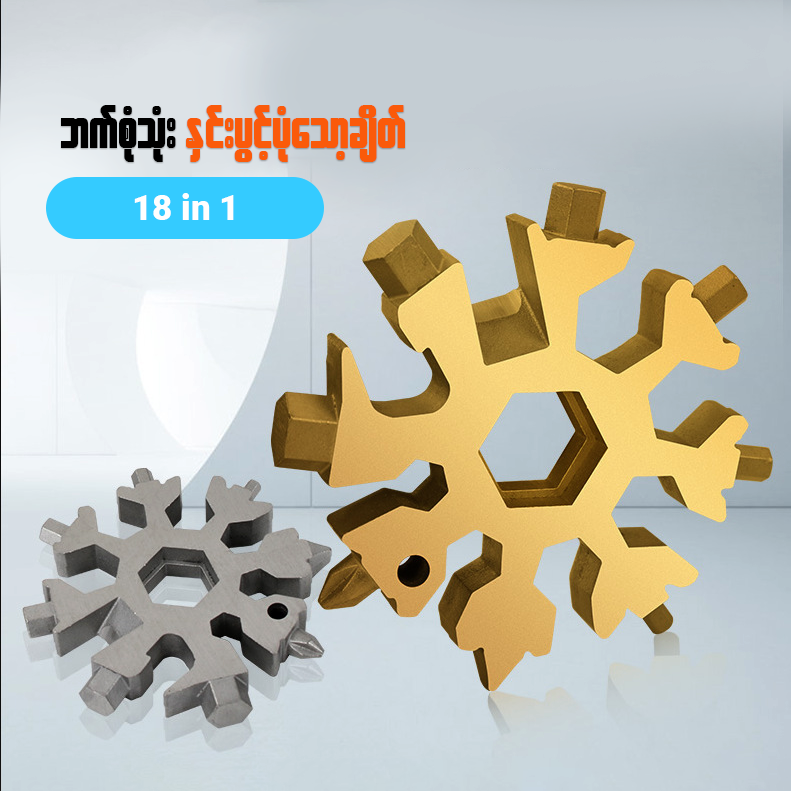
<style>
.page{position:relative;width:791px;height:791px}
.page>*{position:absolute;margin:0}
.t1{font:57.6px "W30ArtHouse";color:#fa5a0a}
.t2{font:57.6px "W30ArtHouse";color:#000000}
.t3{font:34.9px "Roboto-Black";color:#fffefe}
</style>
<div class="page">
<p class="t1" style="left:61px;top:105px;width:344px;height:57px"><span class="t2">bufpHkoHk; </span>ESif;yGifhyHkaomhcsdwf</p>
<p class="t3" style="left:134px;top:193px;width:100px;height:27px">18 in 1</p>
</div>
